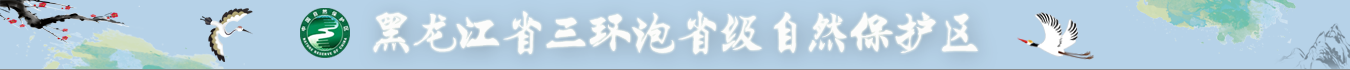
<style>
.page{position:relative;width:1350px;height:70px;background:#b6d2e8}
.page>*{position:absolute;margin:0}
.t1{font:43.8px "HYXingYuTiJ";color:#fafafa}
</style>
<div class="page">
<p class="t1" style="left:373px;top:11px;width:605px;height:44px">黑龙江省三环泡省级自然保护区</p>
</div>
